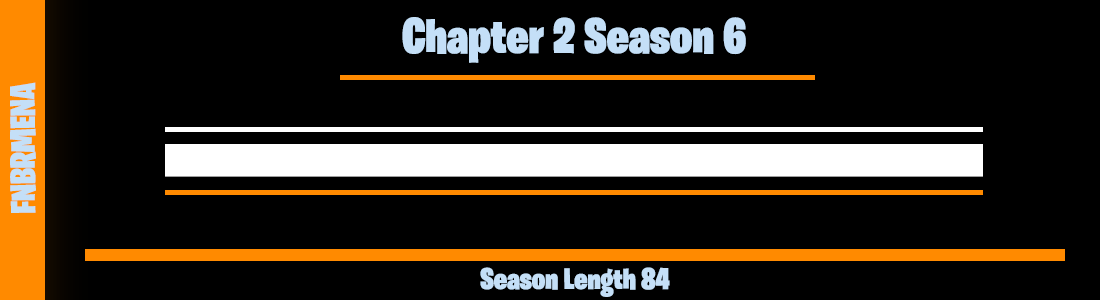
<style>
.page{position:relative;width:1100px;height:300px;background:#000000}
.page>*{position:absolute;margin:0}
.t1{font:50px "BurbankBigCondensed-Black";color:#c4dff7}
.t2{font:35px "BurbankBigCondensed-Black";color:#c4dff7}
.t3{font:30px "BurbankBigCondensed-Black";color:#c4dff7}
</style>
<div class="page">
<p class="t1" style="left:402px;top:17px;width:344px;height:46px">Chapter 2 Season 6</p>
<p class="t2" style="left:10px;top:82px;width:26px;height:131px;rotate:-90deg">FNBRMENA</p>
<p class="t3" style="left:480px;top:267px;width:190px;height:30px">Season Length 84</p>
</div>
